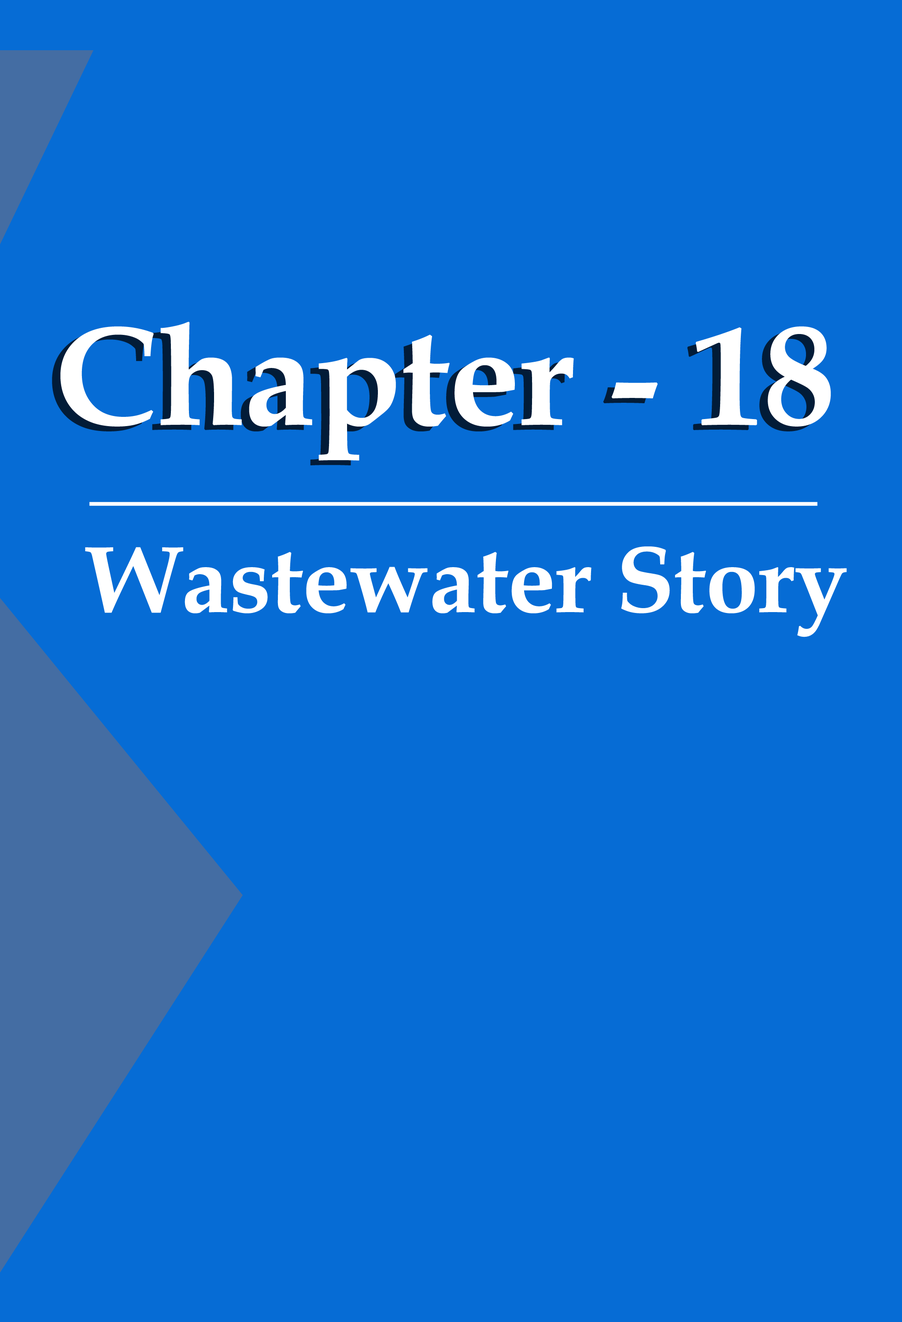
<style>
.page{position:relative;width:902px;height:1322px;background:#066cd5}
.page>*{position:absolute;margin:0}
.t1{font:142px "BookAntiqua-Bold";color:#ffffff}
.t2{font:94.9px "BookAntiqua-Bold";color:#ffffff}
</style>
<div class="page">
<p class="t1" style="left:60px;top:322px;width:771px;height:138px">Chapter - 18</p>
<p class="t2" style="left:85px;top:546px;width:762px;height:91px">Wastewater Story</p>
</div>
